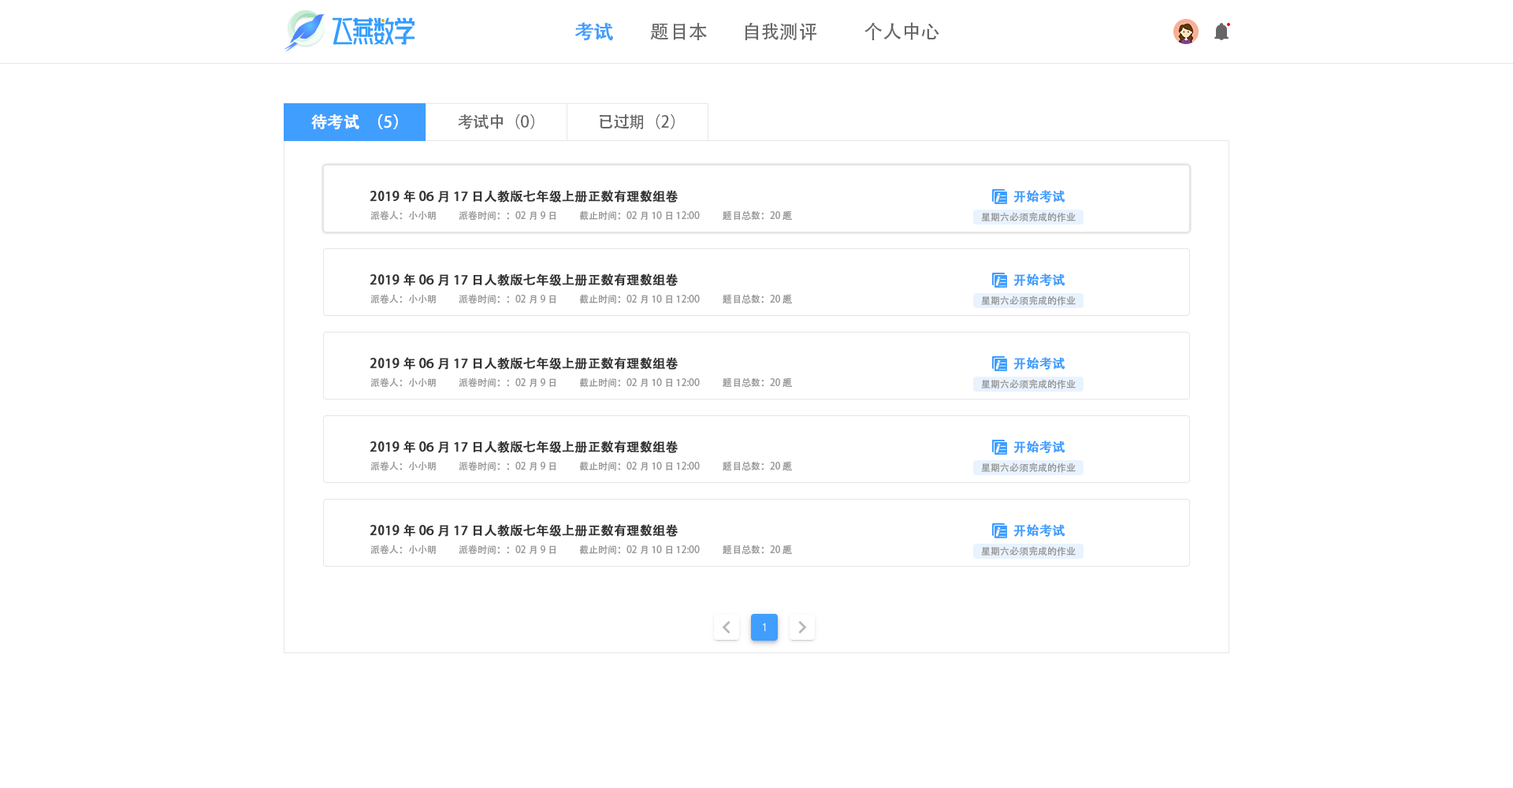
<style>
.page{position:relative;width:1513px;height:788px;background:#ffffff}
.page>*{position:absolute;margin:0}
.t1{font:18.9px "AdobeHeitiStd-Regular";color:#409eff;font-weight:bold}
.t2{font:18.9px "AdobeHeitiStd-Regular";color:#666666}
.t3{font:15.8px "AdobeHeitiStd-Regular";color:#ffffff;font-weight:bold}
.t4{font:15.8px "AdobeHeitiStd-Regular";color:#666666}
.t5{font:12.6px "AdobeHeitiStd-Regular";color:#333333;font-weight:bold}
.t6{font:12.6px "AdobeHeitiStd-Regular";color:#409eff;font-weight:bold}
.t7{font:9.5px "AdobeHeitiStd-Regular";color:#999999}
</style>
<div class="page">
<p class="t1" style="left:575px;top:22px;width:38px;height:19px">考试</p>
<p class="t2" style="left:650px;top:23px;width:57px;height:17px">题目本</p>
<p class="t2" style="left:745px;top:22px;width:71px;height:19px">自我测评</p>
<p class="t2" style="left:865px;top:22px;width:74px;height:18px">个人中心</p>
<p class="t3" style="left:311px;top:114px;width:87px;height:16px">待考试（5）</p>
<p class="t4" style="left:458px;top:114px;width:76px;height:15px">考试中（0）</p>
<p class="t4" style="left:600px;top:114px;width:75px;height:15px">已过期（2）</p>
<p class="t5" style="left:370px;top:190px;width:309px;height:13px">2019年06月17日人教版七年级上册正数有理数组卷</p>
<p class="t6" style="left:1013px;top:190px;width:52px;height:13px">开始考试</p>
<p class="t7" style="left:370px;top:210px;width:66px;height:10px">派卷人：小小明</p>
<p class="t7" style="left:459px;top:210px;width:97px;height:11px">派卷时间：：02月9日</p>
<p class="t7" style="left:579px;top:210px;width:121px;height:11px">截止时间：02月10日 12:00</p>
<p class="t7" style="left:723px;top:210px;width:70px;height:11px">题目总数：20题</p>
<p class="t7" style="left:981px;top:212px;width:95px;height:10px">星期六必须完成的作业</p>
<p class="t5" style="left:370px;top:273px;width:309px;height:13px">2019年06月17日人教版七年级上册正数有理数组卷</p>
<p class="t6" style="left:1013px;top:273px;width:52px;height:14px">开始考试</p>
<p class="t7" style="left:370px;top:294px;width:66px;height:9px">派卷人：小小明</p>
<p class="t7" style="left:459px;top:294px;width:97px;height:10px">派卷时间：：02月9日</p>
<p class="t7" style="left:579px;top:294px;width:121px;height:10px">截止时间：02月10日 12:00</p>
<p class="t7" style="left:723px;top:294px;width:70px;height:10px">题目总数：20题</p>
<p class="t7" style="left:981px;top:296px;width:95px;height:10px">星期六必须完成的作业</p>
<p class="t5" style="left:370px;top:357px;width:309px;height:13px">2019年06月17日人教版七年级上册正数有理数组卷</p>
<p class="t6" style="left:1013px;top:357px;width:52px;height:13px">开始考试</p>
<p class="t7" style="left:370px;top:377px;width:66px;height:10px">派卷人：小小明</p>
<p class="t7" style="left:459px;top:377px;width:97px;height:11px">派卷时间：：02月9日</p>
<p class="t7" style="left:579px;top:377px;width:121px;height:11px">截止时间：02月10日 12:00</p>
<p class="t7" style="left:723px;top:377px;width:70px;height:11px">题目总数：20题</p>
<p class="t7" style="left:981px;top:379px;width:95px;height:10px">星期六必须完成的作业</p>
<p class="t5" style="left:370px;top:441px;width:309px;height:12px">2019年06月17日人教版七年级上册正数有理数组卷</p>
<p class="t6" style="left:1013px;top:441px;width:52px;height:13px">开始考试</p>
<p class="t7" style="left:370px;top:461px;width:66px;height:9px">派卷人：小小明</p>
<p class="t7" style="left:459px;top:461px;width:97px;height:10px">派卷时间：：02月9日</p>
<p class="t7" style="left:579px;top:461px;width:121px;height:10px">截止时间：02月10日 12:00</p>
<p class="t7" style="left:723px;top:461px;width:70px;height:10px">题目总数：20题</p>
<p class="t7" style="left:981px;top:463px;width:95px;height:10px">星期六必须完成的作业</p>
<p class="t5" style="left:370px;top:524px;width:309px;height:13px">2019年06月17日人教版七年级上册正数有理数组卷</p>
<p class="t6" style="left:1013px;top:524px;width:52px;height:13px">开始考试</p>
<p class="t7" style="left:370px;top:545px;width:66px;height:9px">派卷人：小小明</p>
<p class="t7" style="left:459px;top:545px;width:97px;height:10px">派卷时间：：02月9日</p>
<p class="t7" style="left:579px;top:545px;width:121px;height:10px">截止时间：02月10日 12:00</p>
<p class="t7" style="left:723px;top:545px;width:70px;height:10px">题目总数：20题</p>
<p class="t7" style="left:981px;top:546px;width:95px;height:10px">星期六必须完成的作业</p>
</div>
